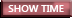
<style>
.page{position:relative;width:72px;height:18px}
.page>*{position:absolute;margin:0}
.t1{font:10px "SegoeUI-SemiBold";color:#ffffff}
</style>
<div class="page">
<p class="t1" style="left:8px;top:5px;width:56px;height:7px">SHOW TIME</p>
</div>
